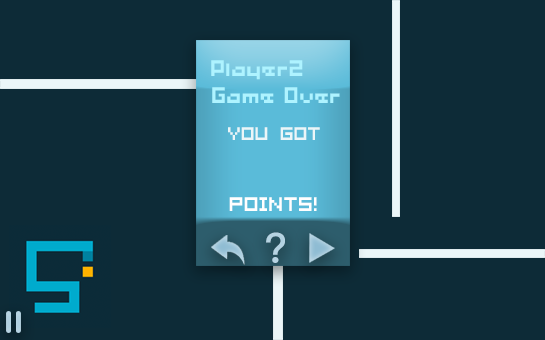
<style>
.page{position:relative;width:545px;height:340px;background:#0d2b37}
.page>*{position:absolute;margin:0}
.t1{font:25px "04b03b";letter-spacing:-0.019em;color:#aef3ff}
.t2{font:15.4px "04b08";letter-spacing:-0.019em;color:#ebf6f8;scale:0.91 1}
.t3{font:16.6px "04b08";letter-spacing:-0.019em;color:#ffffff;scale:0.91 1}
.t4{font:20.9px "PingFangSC-Medium";letter-spacing:-0.019em;color:#b6d3e2}
</style>
<div class="page">
<p class="t1" style="left:211px;top:60px;width:92px;height:20px">Player2</p>
<p class="t1" style="left:212px;top:87px;width:128px;height:16px">Game Over</p>
<p class="t2" style="left:228px;top:127px;width:92px;height:13px">You got</p>
<p class="t3" style="left:229px;top:197px;width:88px;height:14px">POINTS!</p>
<p class="t4" style="left:266px;top:232px;width:19px;height:31px">?</p>
</div>
